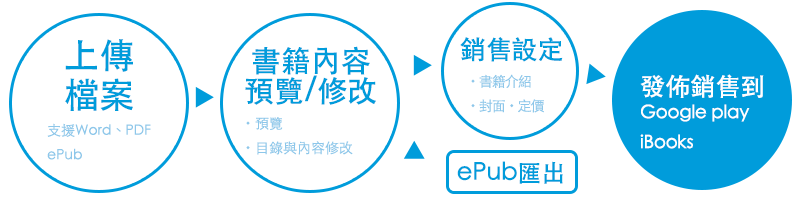
<style>
.page{position:relative;width:800px;height:200px;background:#ffffff}
.page>*{position:absolute;margin:0}
.t1{font:35.6px/39.1px "STHeitiTC-Medium";color:#009cdb}
.t2{font:26px "STHeitiTC-Medium";color:#009cdb}
.t3{font:30px/30px "STHeitiTC-Medium";color:#009cdb}
.t4{font:14px "STHeitiTC-Light";letter-spacing:-0.08em;color:#8dc7ea}
.t5{font:14px "KozGoPr6N-Regular";letter-spacing:-0.08em;color:#8dc7ea}
.t6{font:18px/30px "STHeitiTC-Medium";color:#ffffff}
.t7{font:25px/30px "STHeitiTC-Medium";color:#ffffff}
.t8{font:14px "STHeitiTC-Light";color:#8dc7ea}
.t9{font:14px "KozGoPr6N-Regular";color:#8dc7ea}
.t10{font:24px "STHeitiTC-Medium";color:#009cdb}
</style>
<div class="page">
<p class="t1" style="left:65px;top:39px;width:68px;height:72px">上傳<br>檔案</p>
<p class="t2" style="left:460px;top:37px;width:103px;height:25px">銷售設定</p>
<p class="t3" style="left:245px;top:46px;width:131px;height:59px;text-align:center">書籍內容<br>預覽/修改</p>
<p class="t4" style="left:471px;top:74px;width:73px;height:39px"><span class="t5">・</span>書籍介紹<br><span class="t5">・</span>封面<span class="t5">・</span>定價</p>
<p class="t6" style="left:640px;top:74px;width:124px;height:75px"><span class="t7">發佈銷售到<br></span>Google play<br>iBooks</p>
<p class="t8" style="left:47px;top:123px;width:104px;height:37px">支援Word、PDF<br>ePub</p>
<p class="t8" style="left:246px;top:117px;width:107px;height:38px"><span class="t9">・</span>預覽<br><span class="t9">・</span>目錄與內容修改</p>
<p class="t10" style="left:457px;top:161px;width:106px;height:23px">ePub匯出</p>
</div>
